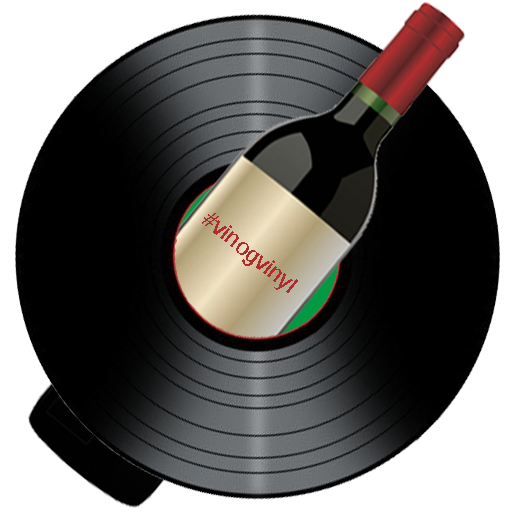
<style>
.page{position:relative;width:512px;height:512px;background:#ffffff}
.page>*{position:absolute;margin:0}
.t1{font:23.2px "Helvetica";color:#ad2c2f}
</style>
<div class="page">
<p class="t1" style="left:202px;top:213px;width:96px;height:80px;rotate:39deg">#vinogvinyl</p>
</div>
